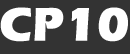
<style>
.page{position:relative;width:130px;height:54px;background:#333333}
.page>*{position:absolute;margin:0}
.t1{font:48px "ErasITC-Bold";color:#ffffff;font-weight:bold}
</style>
<div class="page">
<p class="t1" style="left:0px;top:7px;width:128px;height:35px">CP10</p>
</div>
